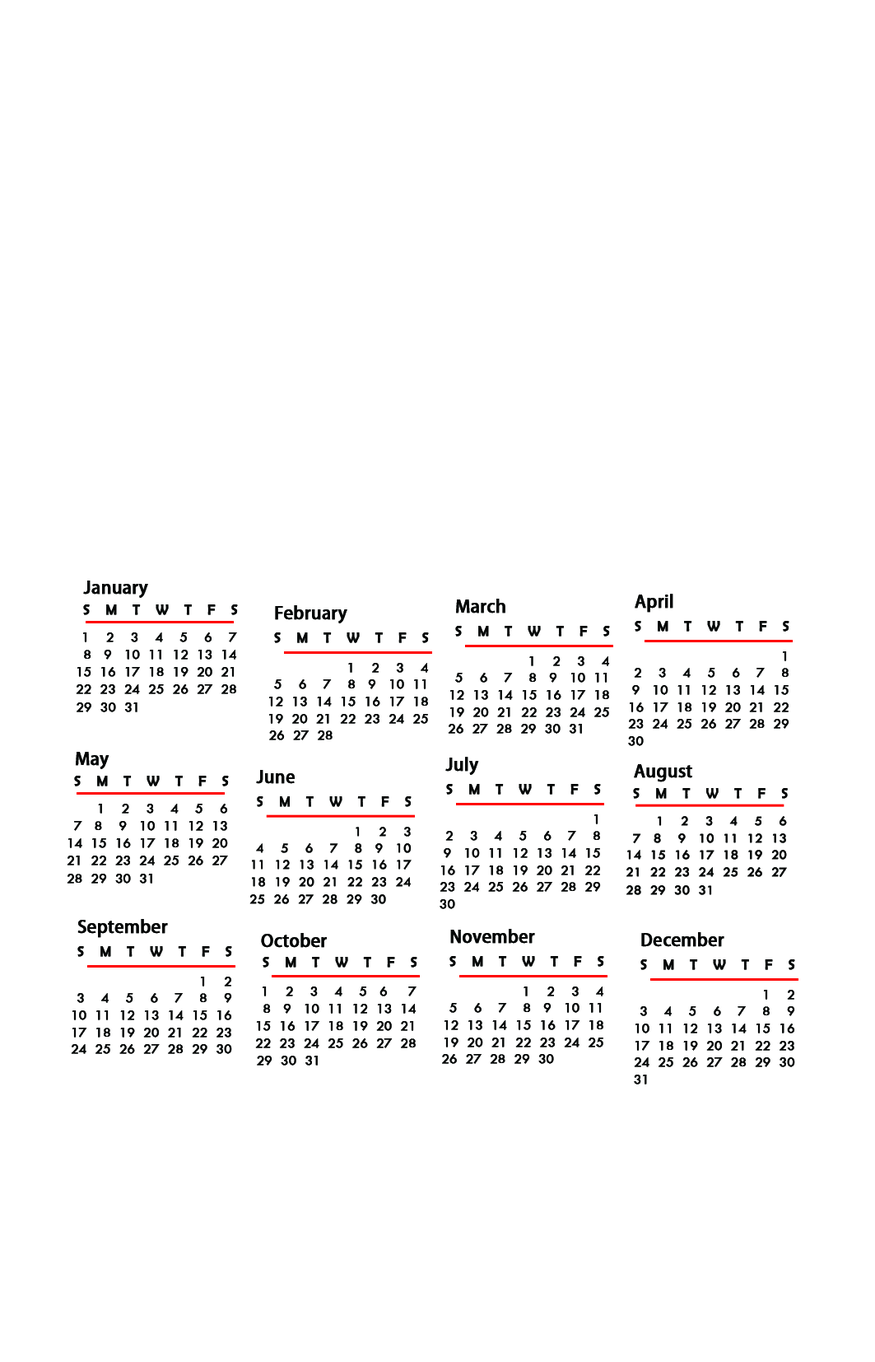
<style>
.page{position:relative;width:875px;height:1362px;background:#ffffff}
.page>*{position:absolute;margin:0}
.t1{font:17.2px "AdobeFanHeitiStd-Bold";color:#040606;font-weight:bold}
.t2{font:13.7px "BerlinSansFB-Reg";letter-spacing:0.2em;color:#040606;font-weight:bold}
.t3{font:13.7px/17.2px "TwCenMT-Regular";color:#040606;font-weight:bold}
.t4{font:13.7px/17.2px "SymbolMT";color:#040606;font-weight:bold}
.t5{font:17.1px "AdobeFanHeitiStd-Bold";color:#040606;font-weight:bold}
.t6{font:13.7px/17.1px "TwCenMT-Regular";color:#040606;font-weight:bold}
.t7{font:13.7px/17.1px "SymbolMT";color:#040606;font-weight:bold}
</style>
<div class="page">
<p class="t1" style="left:83px;top:581px;width:65px;height:17px">January</p>
<p class="t1" style="left:635px;top:594px;width:39px;height:19px">April</p>
<p class="t2" style="left:83px;top:604px;width:155px;height:11px">S  M  T  W  T  F  S</p>
<p class="t1" style="left:275px;top:605px;width:73px;height:18px">February</p>
<p class="t1" style="left:456px;top:599px;width:50px;height:15px">March</p>
<p class="t2" style="left:455px;top:626px;width:155px;height:11px">S  M  T  W  T  F  S</p>
<p class="t2" style="left:635px;top:621px;width:155px;height:11px">S  M  T  W  T  F  S</p>
<p class="t3" style="left:76px;top:632px;width:161px;height:80px;text-align:right">1    2    3    4    5    6    7<br>8   9   10  11  12  13  14<br>15  16  17  18  19  20  21<br>22  23  24  25  26  27  28<br>29  30  31</p>
<p class="t2" style="left:274px;top:632px;width:155px;height:11px">S  M  T  W  T  F  S</p>
<p class="t3" style="left:628px;top:651px;width:162px;height:95px;text-align:right"><span class="t4">  </span>1<br>2    3    4    5    6    7    8<br>9   10  11  12  13  14  15<br>16  17  18  19  20  21  22<br>  23  24  25  26  27  28  29<br>30</p>
<p class="t3" style="left:269px;top:663px;width:160px;height:77px;text-align:right"><span class="t4">  </span>1    2    3    4<br>5    6    7    8   9   10  11<br>12  13  14  15  16  17  18<br>19  20  21  22  23  24  25<br>26  27  28</p>
<p class="t3" style="left:448px;top:656px;width:162px;height:78px;text-align:right"><span class="t4">  </span>1    2    3    4<br>5    6    7    8   9   10  11<br>12  13  14  15  16  17  18<br>19  20  21  22  23  24  25<br>26  27  28  29  30  31</p>
<p class="t1" style="left:76px;top:752px;width:34px;height:17px">May</p>
<p class="t1" style="left:446px;top:757px;width:33px;height:18px">July</p>
<p class="t5" style="left:256px;top:770px;width:39px;height:14px">June</p>
<p class="t5" style="left:634px;top:764px;width:59px;height:18px">August</p>
<p class="t2" style="left:74px;top:776px;width:155px;height:10px">S  M  T  W  T  F  S</p>
<p class="t2" style="left:446px;top:784px;width:155px;height:11px">S  M  T  W  T  F  S</p>
<p class="t2" style="left:257px;top:796px;width:155px;height:11px">S  M  T  W  T  F  S</p>
<p class="t2" style="left:633px;top:788px;width:155px;height:11px">S  M  T  W  T  F  S</p>
<p class="t3" style="left:67px;top:804px;width:161px;height:80px;text-align:right">1    2    3    4    5    6<br>7   8    9   10  11  12  13<br>14  15  16  17  18  19  20<br>21  22  23  24  25  26  27<br> 28  29  30  31</p>
<p class="t3" style="left:440px;top:814px;width:161px;height:95px;text-align:right"><span class="t4">  </span>1<br>2    3    4    5    6    7    8<br>9   10  11  12  13  14  15<br>16  17  18  19  20  21  22<br>  23  24  25  26  27  28  29<br>30</p>
<p class="t6" style="left:627px;top:816px;width:160px;height:79px;text-align:right">1    2    3    4    5    6<br>7   8    9   10  11  12  13<br>14  15  16  17  18  19  20<br>21  22  23  24  25  26  27<br> 28  29  30  31</p>
<p class="t6" style="left:250px;top:827px;width:162px;height:77px;text-align:right"><span class="t7">  </span>1    2    3<br>4    5    6    7    8   9   10<br>11  12  13  14  15  16  17<br>18  19  20  21  22  23  24<br>25  26  27  28  29  30</p>
<p class="t1" style="left:77px;top:919px;width:91px;height:19px">September</p>
<p class="t1" style="left:450px;top:929px;width:85px;height:15px">November</p>
<p class="t1" style="left:261px;top:933px;width:66px;height:15px">October</p>
<p class="t1" style="left:642px;top:932px;width:83px;height:15px">December</p>
<p class="t2" style="left:77px;top:946px;width:155px;height:11px">S  M  T  W  T  F  S</p>
<p class="t2" style="left:263px;top:957px;width:155px;height:11px">S  M  T  W  T  F  S</p>
<p class="t2" style="left:450px;top:956px;width:154px;height:11px">S  M  T  W  T  F  S</p>
<p class="t2" style="left:641px;top:959px;width:155px;height:11px">S  M  T  W  T  F  S</p>
<p class="t3" style="left:71px;top:977px;width:161px;height:77px;text-align:right"><span class="t4">  </span>1    2<br>3    4    5    6    7    8    9<br>10  11  12  13  14  15  16<br>17  18  19  20  21  22  23<br>24  25  26  27  28  29  30</p>
<p class="t3" style="left:255px;top:987px;width:162px;height:79px;text-align:right">1    2    3    4    5   6     7<br>8   9   10  11  12  13  14<br>15  16  17  18  19  20  21<br>22  23  24  25  26  27  28<br>29  30  31</p>
<p class="t3" style="left:442px;top:987px;width:162px;height:77px;text-align:right"><span class="t4">  </span>1    2    3    4<br>5    6    7    8   9   10  11<br>12  13  14  15  16  17  18<br>19  20  21  22  23  24  25<br>26  27  28  29  30</p>
<p class="t3" style="left:634px;top:990px;width:162px;height:95px;text-align:right"><span class="t4">  </span>1    2<br>3    4    5    6    7    8    9<br>10  11  12  13  14  15  16<br>17  18  19  20  21  22  23<br>24  25  26  27  28  29  30<br>31</p>
</div>
